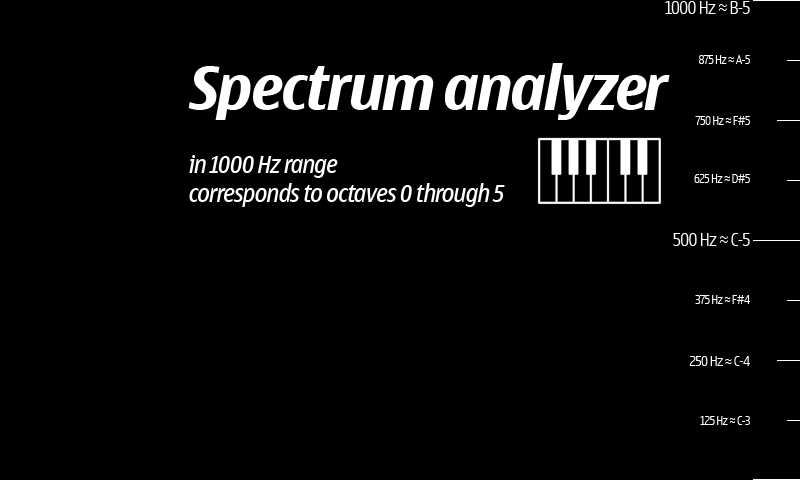
<style>
.page{position:relative;width:800px;height:480px;background:#000000}
.page>*{position:absolute;margin:0}
.t1{font:18px "NokiaLargeMultiscriptLight";color:#ffffff}
.t2{font:60px "NokiaLargeMultiscript-BoldItalic";color:#ffffff}
.t3{font:12px "NokiaLargeMultiscriptLight";color:#ffffff}
.t4{font:24px "NokiaLargeMultiscript-Italic";color:#ffffff}
.t5{font:14px "NokiaLargeMultiscriptLight";color:#ffffff}
</style>
<div class="page">
<p class="t1" style="left:665px;top:1px;width:85px;height:13px">1000 Hz ≈ B-5</p>
<p class="t2" style="left:188px;top:63px;width:482px;height:57px">Spectrum analyzer</p>
<p class="t3" style="left:699px;top:55px;width:51px;height:9px">875 Hz ≈ A-5</p>
<p class="t3" style="left:695px;top:116px;width:55px;height:9px">750 Hz ≈ F#5</p>
<p class="t4" style="left:189px;top:155px;width:316px;height:52px">in 1000 Hz range<br>corresponds to octaves 0 through 5</p>
<p class="t3" style="left:694px;top:174px;width:56px;height:9px">625 Hz ≈ D#5</p>
<p class="t1" style="left:673px;top:233px;width:77px;height:13px">500 Hz ≈ C-5</p>
<p class="t3" style="left:695px;top:295px;width:55px;height:9px">375 Hz ≈ F#4</p>
<p class="t5" style="left:689px;top:356px;width:61px;height:10px">250 Hz ≈ C-4</p>
<p class="t3" style="left:700px;top:416px;width:50px;height:9px">125 Hz ≈ C-3</p>
</div>
